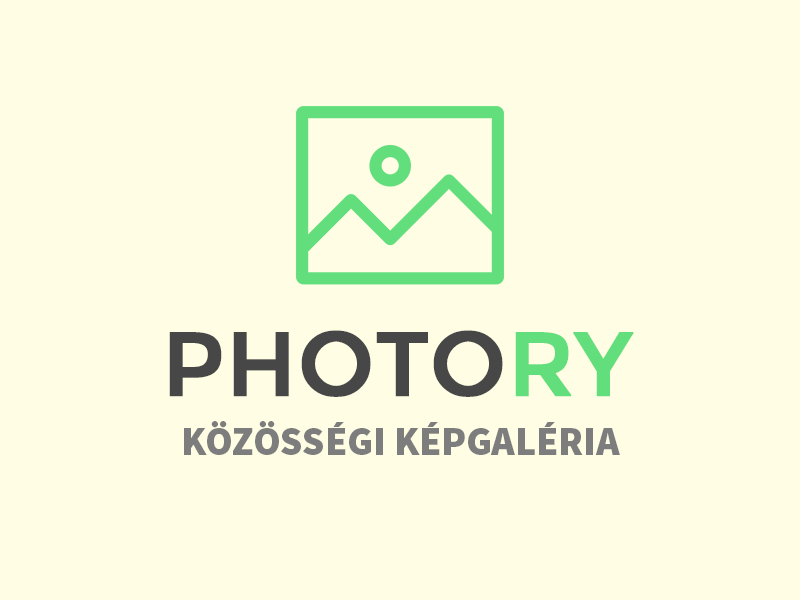
<style>
.page{position:relative;width:800px;height:600px;background:#fffde4}
.page>*{position:absolute;margin:0}
.t1{font:90px "Montserrat-Regular";color:#474747;text-transform:uppercase;font-weight:bold}
.t2{font:90px "Montserrat-Regular";color:#62df7c;text-transform:uppercase;font-weight:bold}
.t3{font:40px "SourceSansPro-Black";color:#7d7d7d;text-transform:uppercase}
</style>
<div class="page">
<p class="t1" style="left:169px;top:330px;width:465px;height:67px">photo<span class="t2">ry</span></p>
<p class="t3" style="left:184px;top:421px;width:436px;height:34px">közösségi képgaléria</p>
</div>
